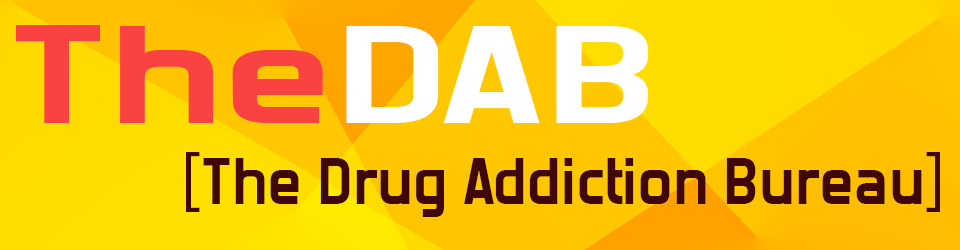
<style>
.page{position:relative;width:960px;height:250px}
.page>*{position:absolute;margin:0}
.t1{font:154.1px "ForgottenFuturist-Bold";color:#fc4242;scale:1.57 1}
.t2{font:154.1px "ForgottenFuturist-Bold";color:#ffffff;scale:1.57 1}
.t3{font:75px "ForgottenFuturist-Bold";color:#3f0808}
.t4{font:75px "MyriadPro-Regular";color:#3f0808}
</style>
<div class="page">
<p class="t1" style="left:15px;top:25px;width:634px;height:98px">The<span class="t2">DAB</span></p>
<p class="t3" style="left:186px;top:152px;width:754px;height:65px"><span class="t4">[</span>The Drug Addiction Bureau<span class="t4">]</span></p>
</div>
